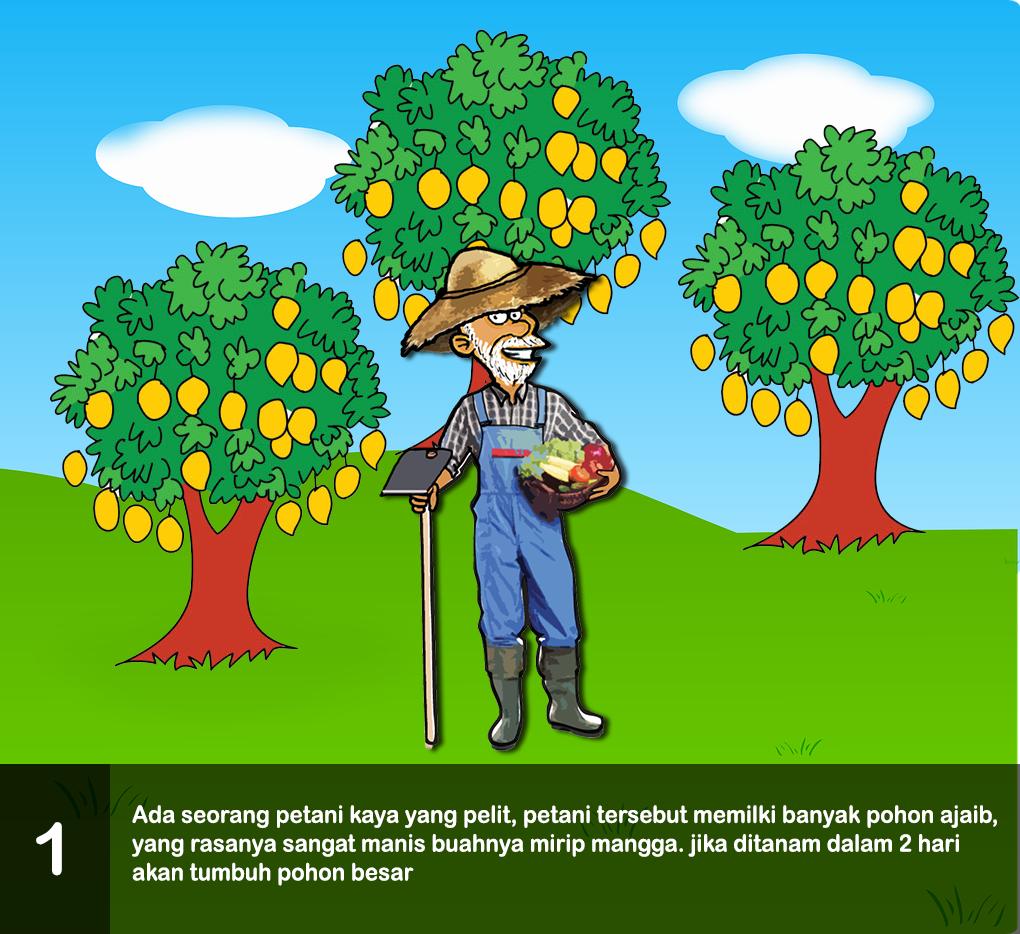
<style>
.page{position:relative;width:1020px;height:934px}
.page>*{position:absolute;margin:0}
.t1{font:24px "ArialRoundedMTBold";color:#ffffff;scale:0.93 1}
.t2{font:72px "ArialRoundedMTBold";color:#ffffff}
</style>
<div class="page">
<p class="t1" style="left:132px;top:805px;width:865px;height:81px">Ada seorang petani kaya yang pelit, petani tersebut memilki banyak pohon ajaib, yang rasanya sangat manis buahnya mirip mangga. jika ditanam dalam 2 hari akan tumbuh pohon besar</p>
<p class="t2" style="left:36px;top:822px;width:26px;height:54px">1</p>
</div>
